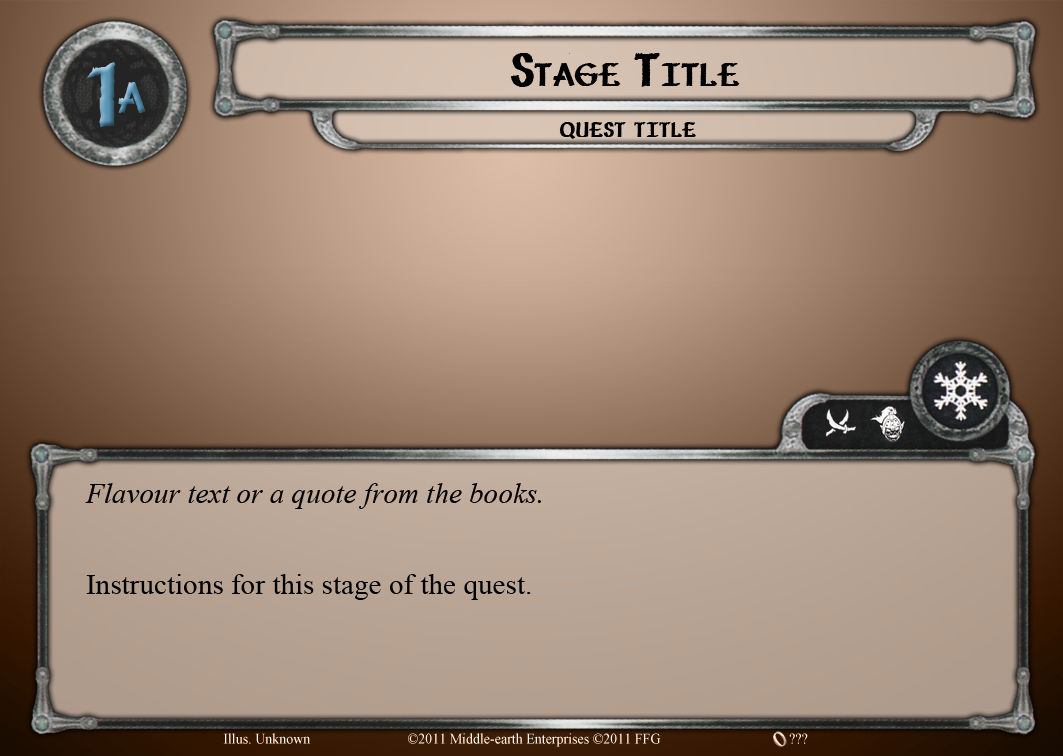
<style>
.page{position:relative;width:1063px;height:756px}
.page>*{position:absolute;margin:0}
.t1{font:45.8px "Vafthrudnir";color:#000000;font-variant:small-caps}
.t2{font:87.5px "Vafthrudnir";font-variant:small-caps}
.t3{font:58.3px "Vafthrudnir";font-variant:small-caps}
.t4{font:29.2px "Vafthrudnir";letter-spacing:-0.002em;color:#000000;font-variant:small-caps}
.t5{font:29.2px "TimesNewRomanPS-ItalicMT";color:#000000}
.t6{font:29.2px "TimesNewRomanPSMT";color:#000000}
.t7{font:14.6px "TimesNewRomanPSMT";color:#ffffff;scale:0.96 1}
</style>
<div class="page">
<p class="t1" style="left:510px;top:53px;width:230px;height:34px">Stage Title</p>
<p class="t2" style="left:87px;top:62px;width:29px;height:65px">1</p>
<p class="t3" style="left:118px;top:82px;width:28px;height:31px">a</p>
<p class="t4" style="left:559px;top:122px;width:137px;height:17px">quest title</p>
<p class="t5" style="left:85px;top:483px;width:456px;height:26px">Flavour text or a quote from the books.</p>
<p class="t6" style="left:86px;top:574px;width:445px;height:26px">Instructions for this stage of the quest.</p>
<p class="t7" style="left:223px;top:733px;width:88px;height:11px">Illus. Unknown</p>
<p class="t7" style="left:408px;top:733px;width:253px;height:14px">©2011 Middle-earth Enterprises ©2011 FFG</p>
<p class="t7" style="left:789px;top:733px;width:19px;height:11px">???</p>
</div>
